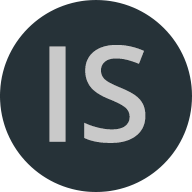
<style>
.page{position:relative;width:192px;height:192px;background:#263238}
.page>*{position:absolute;margin:0}
.t1{font:133.3px "OpenSans-Semibold";color:#cacaca}
</style>
<div class="page">
<p class="t1" style="left:49px;top:45px;width:97px;height:98px">IS</p>
</div>
